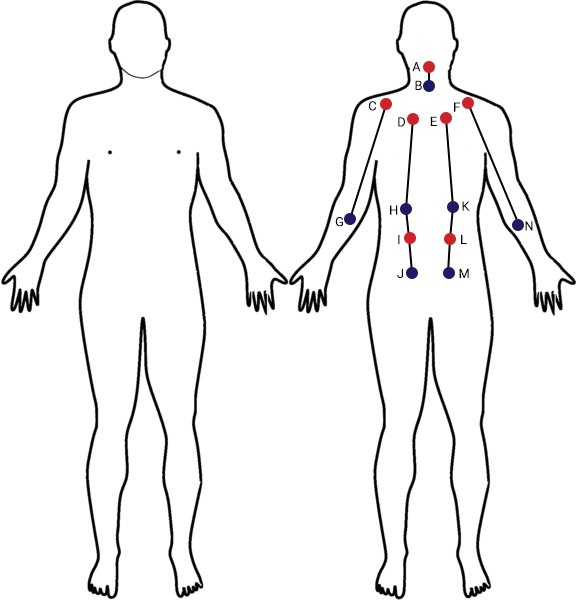
<style>
.page{position:relative;width:576px;height:600px;background:#ffffff}
.page>*{position:absolute;margin:0}
.t1{font:12.5px "Roboto-Light";letter-spacing:0.005em;color:#000000;font-weight:bold}
.t2{font:12.5px "Roboto-Light";letter-spacing:0.005em;font-weight:bold}
</style>
<div class="page">
<p class="t1" style="left:412px;top:62px;width:9px;height:10px">A</p>
<p class="t1" style="left:415px;top:80px;width:7px;height:10px">B</p>
<p class="t1" style="left:369px;top:101px;width:7px;height:10px">C</p>
<p class="t1" style="left:454px;top:102px;width:7px;height:10px">F</p>
<p class="t1" style="left:398px;top:117px;width:7px;height:10px">D</p>
<p class="t1" style="left:430px;top:116px;width:7px;height:10px">E</p>
<p class="t1" style="left:390px;top:205px;width:8px;height:10px">H</p>
<p class="t1" style="left:462px;top:201px;width:8px;height:10px">K</p>
<p class="t1" style="left:335px;top:217px;width:8px;height:10px">G</p>
<p class="t1" style="left:525px;top:221px;width:8px;height:10px">N</p>
<p class="t2" style="left:398px;top:235px;width:2px;height:10px">I</p>
<p class="t1" style="left:461px;top:234px;width:6px;height:10px">L</p>
<p class="t1" style="left:397px;top:268px;width:6px;height:10px">J</p>
<p class="t1" style="left:459px;top:268px;width:10px;height:10px">M</p>
</div>
